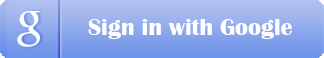
<style>
.page{position:relative;width:324px;height:58px}
.page>*{position:absolute;margin:0}
.t1{font:24px "BritannicBold";color:#ffffff}
</style>
<div class="page">
<p class="t1" style="left:88px;top:18px;width:204px;height:21px">Sign in with Google</p>
</div>
